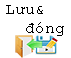
<style>
.page{position:relative;width:71px;height:58px;background:#ffffff}
.page>*{position:absolute;margin:0}
.t1{font:12px "CourierNewPSMT";color:#000000}
</style>
<div class="page">
<p class="t1" style="left:6px;top:5px;width:58px;height:31px">Lưu&amp;<br>  đóng</p>
</div>
